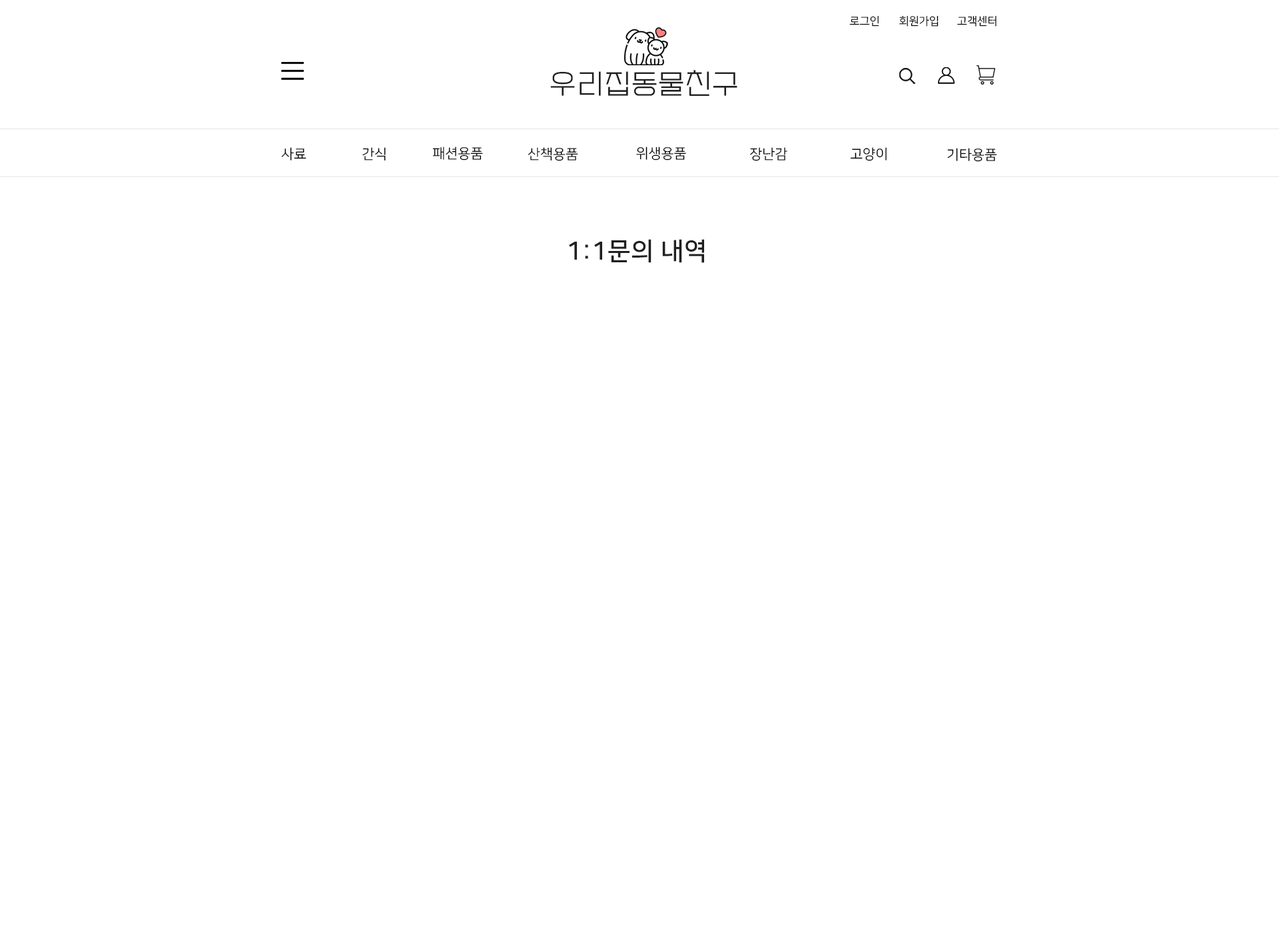
<style>
.page{position:relative;width:1279px;height:932px;background:#ffffff}
.page>*{position:absolute;margin:0}
.t1{font:11.1px "NanumSquareR";color:#000000}
.t2{font:27.8px "EF_watermelonSalad";letter-spacing:0.025em;color:#202020}
.t3{font:13.9px "NanumSquareR";color:#000000}
.t4{font:25px "NanumSquareB";letter-spacing:0.025em;color:#202020}
</style>
<div class="page">
<p class="t1" style="left:849px;top:15px;width:30px;height:12px">로그인</p>
<p class="t1" style="left:899px;top:15px;width:39px;height:12px">회원가입</p>
<p class="t1" style="left:957px;top:15px;width:39px;height:12px">고객센터</p>
<p class="t2" style="left:550px;top:70px;width:187px;height:26px">우리집동물친구</p>
<p class="t3" style="left:281px;top:147px;width:25px;height:14px">사료</p>
<p class="t3" style="left:362px;top:147px;width:24px;height:14px">간식</p>
<p class="t3" style="left:432px;top:147px;width:51px;height:14px">패션용품</p>
<p class="t3" style="left:528px;top:147px;width:50px;height:14px">산책용품</p>
<p class="t3" style="left:636px;top:147px;width:50px;height:14px">위생용품</p>
<p class="t3" style="left:750px;top:147px;width:37px;height:14px">장난감</p>
<p class="t3" style="left:850px;top:147px;width:37px;height:14px">고양이</p>
<p class="t3" style="left:947px;top:148px;width:50px;height:14px">기타용품</p>
<p class="t4" style="left:569px;top:239px;width:135px;height:24px">1:1문의 내역</p>
</div>
